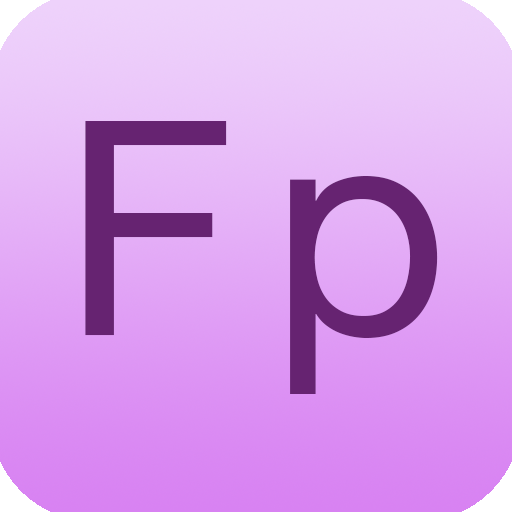
<style>
.page{position:relative;width:512px;height:512px}
.page>*{position:absolute;margin:0}
.t1{font:300px "HelveticaNeue";color:#662371}
</style>
<div class="page">
<p class="t1" style="left:85px;top:121px;width:353px;height:273px">Fp</p>
</div>
